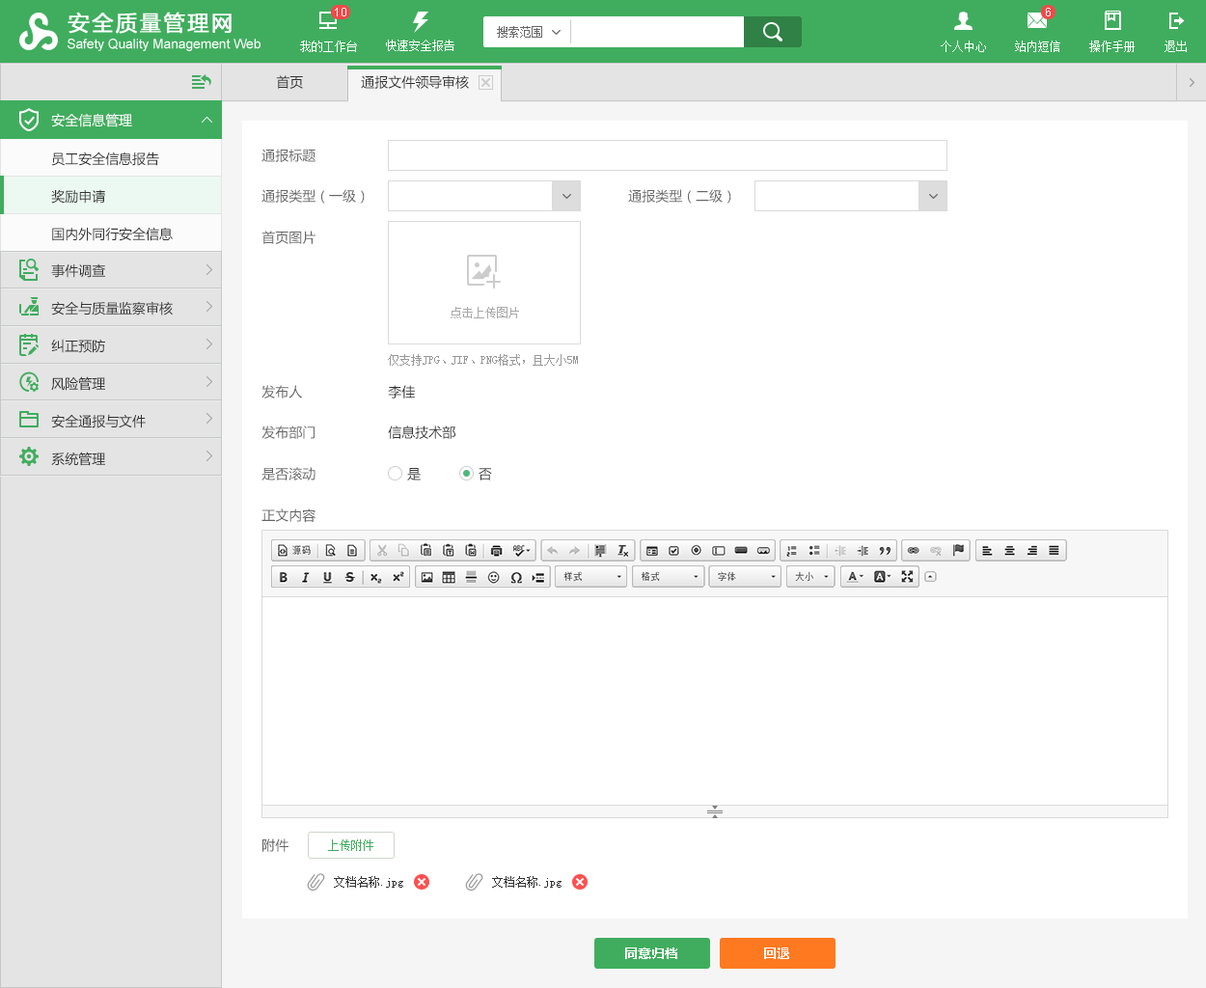
<style>
.page{position:relative;width:1206px;height:988px;background:#ffffff}
.page>*{position:absolute;margin:0}
.t1{font:13.5px "MicrosoftYaHei";color:#333333}
.t2{font:13.5px "MicrosoftYaHei";color:#ffffff}
.t3{font:13.5px "MicrosoftYaHei";color:#666666}
.t4{font:13.5px/37.6px "MicrosoftYaHei";color:#333333}
.t5{font:11.6px "SimSun";color:#a8a8a8}
.t6{font:11.6px "SimSun";color:#999999;text-transform:uppercase}
.t7{font:11.6px "SimSun";color:#40ad5e}
.t8{font:11.6px "SimSun";color:#333333}
.t9{font:13.5px "MicrosoftYaHei-Bold";color:#ffffff}
</style>
<div class="page">
<p class="t1" style="left:276px;top:75px;width:27px;height:14px">首页</p>
<p class="t1" style="left:361px;top:75px;width:108px;height:14px">通报文件领导审核</p>
<p class="t2" style="left:51px;top:113px;width:81px;height:14px">安全信息管理</p>
<p class="t3" style="left:262px;top:149px;width:54px;height:13px">通报标题</p>
<p class="t4" style="left:51px;top:152px;width:122px;height:89px">员工安全信息报告<br>奖励申请<br>国内外同行安全信息</p>
<p class="t3" style="left:262px;top:189px;width:103px;height:15px">通报类型（一级）</p>
<p class="t3" style="left:628px;top:189px;width:104px;height:15px">通报类型（二级）</p>
<p class="t3" style="left:262px;top:231px;width:54px;height:13px">首页图片</p>
<p class="t4" style="left:51px;top:263px;width:122px;height:203px">事件调查<br>安全与质量监察审核<br>纠正预防<br>风险管理<br>安全通报与文件<br>系统管理</p>
<p class="t5" style="left:451px;top:307px;width:68px;height:12px">点击上传图片</p>
<p class="t6" style="left:388px;top:354px;width:190px;height:12px">仅支持jpg、jif、png格式，且大小5m</p>
<p class="t3" style="left:262px;top:385px;width:40px;height:14px">发布人</p>
<p class="t1" style="left:388px;top:385px;width:27px;height:14px">李佳</p>
<p class="t3" style="left:262px;top:426px;width:53px;height:13px">发布部门</p>
<p class="t1" style="left:388px;top:426px;width:68px;height:13px">信息技术部</p>
<p class="t3" style="left:262px;top:467px;width:54px;height:14px">是否滚动</p>
<p class="t1" style="left:407px;top:468px;width:14px;height:13px">是</p>
<p class="t1" style="left:479px;top:468px;width:13px;height:13px">否</p>
<p class="t3" style="left:262px;top:509px;width:54px;height:13px">正文内容</p>
<p class="t3" style="left:263px;top:839px;width:26px;height:13px">附件</p>
<p class="t7" style="left:328px;top:840px;width:46px;height:11px">上传附件</p>
<p class="t8" style="left:334px;top:876px;width:69px;height:12px">文档名称.jpg</p>
<p class="t8" style="left:492px;top:876px;width:70px;height:12px">文档名称.jpg</p>
<p class="t9" style="left:625px;top:948px;width:53px;height:11px">同意归档</p>
<p class="t9" style="left:764px;top:948px;width:26px;height:11px">回退</p>
</div>
